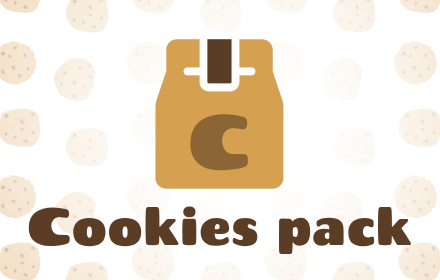
<style>
.page{position:relative;width:440px;height:280px;background:#ffffff}
.page>*{position:absolute;margin:0}
.t1{font:51.9px "Chango-Regular";color:#5b3d26;scale:0.83 1}
.t2{font:51.9px "Chango-Regular";color:#5b3d26;scale:1.03 1}
</style>
<div class="page">
<p class="t1" style="left:28px;top:206px;width:383px;height:48px"><span class="t2">C</span>ookies pack</p>
</div>
